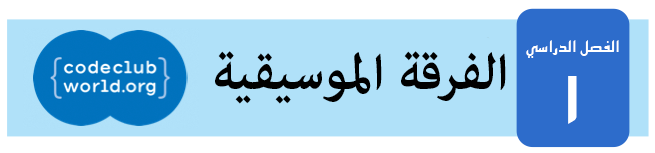
<style>
.page{position:relative;width:655px;height:153px;background:#b0e1f9}
.page>*{position:absolute;margin:0}
.t1{font:18px "KufiStandardGK";color:#ffffff}
.t2{font:72px "AdobeArabic-Bold";color:#000000}
.t3{font:72px "KufiStandardGK";color:#ffffff}
</style>
<div class="page">
<p class="t1" style="left:526px;top:40px;width:93px;height:18px">الفصل الدراسي</p>
<p class="t2" style="left:215px;top:51px;width:291px;height:53px">الفرقة الموسيقية</p>
<p class="t3" style="left:568px;top:76px;width:9px;height:48px">١</p>
</div>
